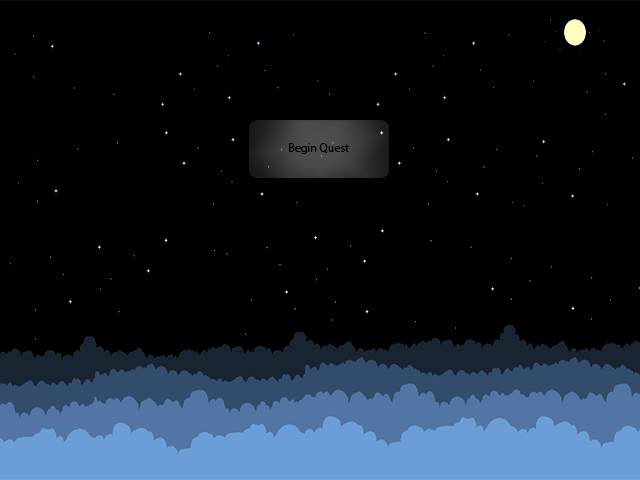
<style>
.page{position:relative;width:640px;height:480px;background:#000000}
.page>*{position:absolute;margin:0}
.t1{font:12px "MyriadPro-Regular";color:#000000}
</style>
<div class="page">
<p class="t1" style="left:289px;top:143px;width:60px;height:11px">Begin Quest</p>
</div>
